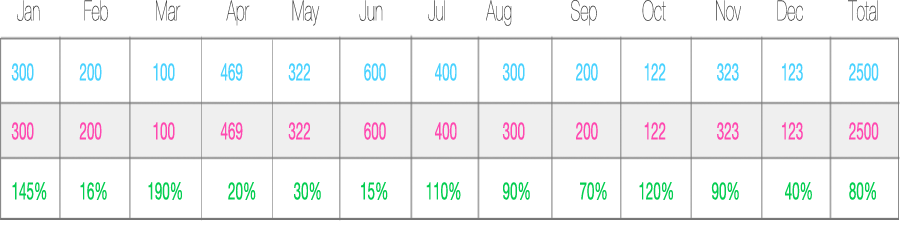
<style>
.page{position:relative;width:900px;height:250px;background:#ffffff}
.page>*{position:absolute;margin:0}
.t1{font:28px "HelveticaNeue-UltraLight";color:#424242;scale:0.58 1}
.t2{font:24px "HelveticaNeue";color:#49d2ff;scale:0.56 1}
.t3{font:24px "HelveticaNeue";color:#ff49b0;scale:0.56 1}
.t4{font:24px "HelveticaNeue";color:#03ce50;scale:0.56 1}
</style>
<div class="page">
<p class="t1" style="left:17px;top:0px;width:861px;height:26px">Jan   Feb     Mar       Apr   May         Jun          Jul         Aug             Sep          Oct           Nov        Dec          Total</p>
<p class="t2" style="left:11px;top:63px;width:868px;height:18px">300    200   100    469      322           600      400    300   200    122   323   123     2500</p>
<p class="t3" style="left:11px;top:122px;width:868px;height:18px">300    200   100    469      322           600      400    300   200    122   323   123     2500</p>
<p class="t4" style="left:12px;top:182px;width:864px;height:18px">145%     16%      190%            20%  30%        15%     110%    90%    70%       120%      90%    40%     80%</p>
</div>
